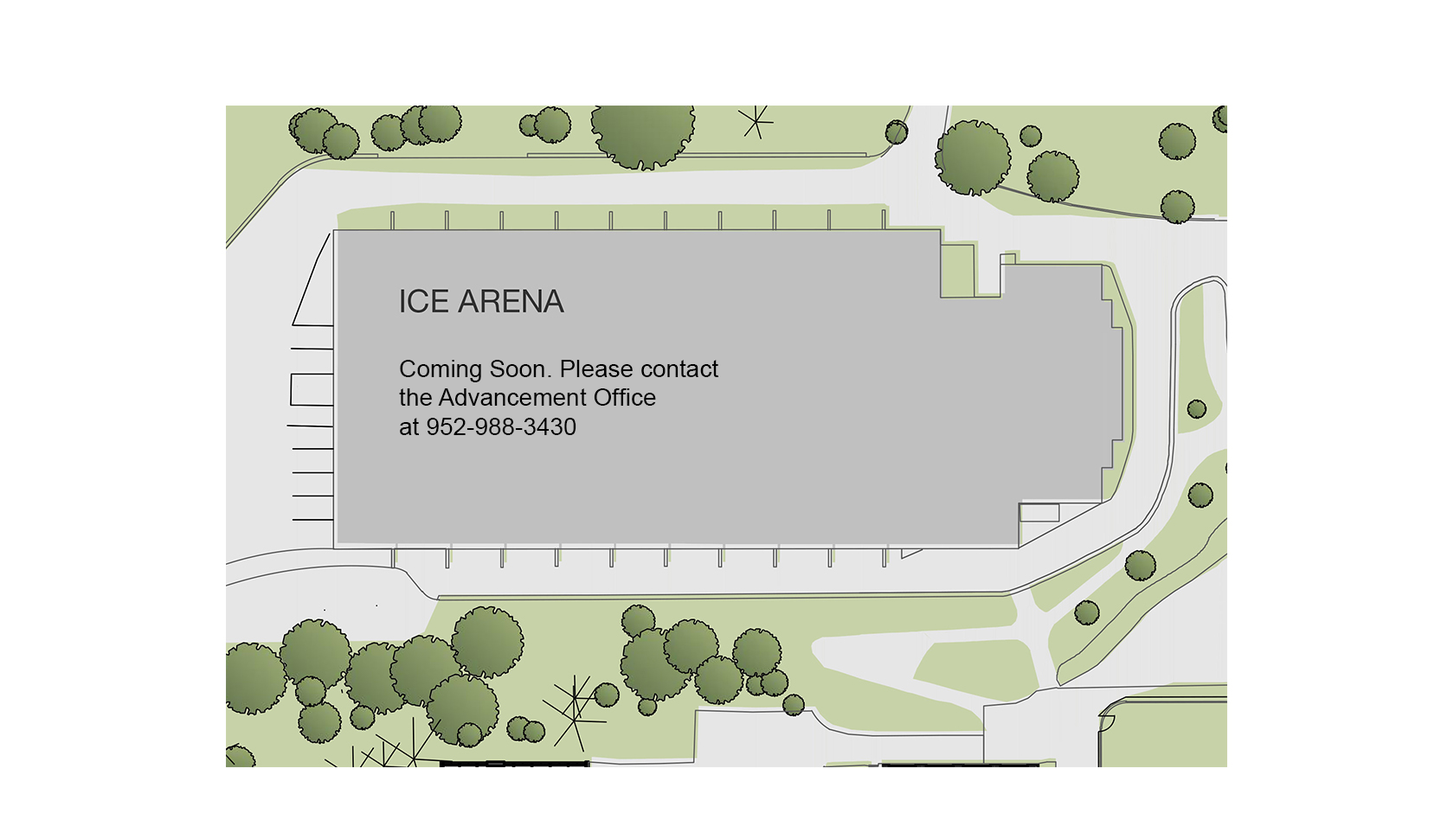
<style>
.page{position:relative;width:1454px;height:820px;background:#ffffff}
.page>*{position:absolute;margin:0}
.t1{font:24.2px "ArialMT";color:#000000}
</style>
<div class="page">
<p class="t1" style="left:399px;top:360px;width:319px;height:75px;text-align:right">Coming Soon. Please contact the Advancement Office<br>at 952-988-3430</p>
</div>
